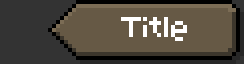
<style>
.page{position:relative;width:244px;height:64px;background:#665945}
.page>*{position:absolute;margin:0}
.t1{font:28px "7px4bus";letter-spacing:-0.05em;color:#ffffff}
</style>
<div class="page">
<p class="t1" style="left:121px;top:17px;width:66px;height:24px">Title</p>
</div>
